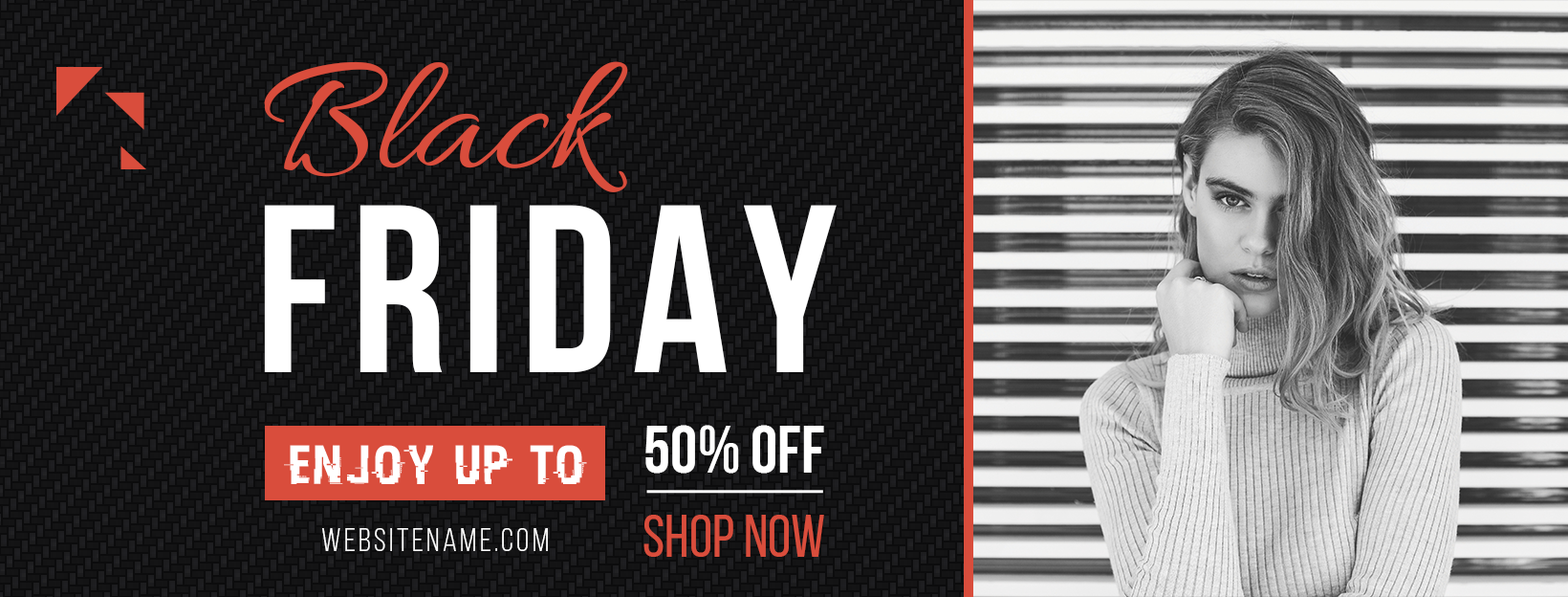
<style>
.page{position:relative;width:1568px;height:597px}
.page>*{position:absolute;margin:0}
.t1{font:171.5px "Allura-Regular";color:#d94d3c}
.t2{font:171.5px "Allura-Regular";color:#d94d3c;text-transform:uppercase}
.t3{font:237.8px "BebasNeueBold";letter-spacing:0.06em;color:#ffffff;text-transform:uppercase}
.t4{font:68.1px "BebasNeueBold";color:#ffffff;text-transform:uppercase}
.t5{font:55.5px "HACKED";letter-spacing:0.06em;color:#ffffff;text-transform:uppercase}
.t6{font:59.5px "BebasNeueRegular";color:#d94d3c;text-transform:uppercase}
.t7{font:32.5px "BebasNeueBook";letter-spacing:0.1em;color:#ffffff;text-transform:uppercase}
</style>
<div class="page">
<p class="t1" style="left:264px;top:61px;width:364px;height:131px"><span class="t2">b</span>lack</p>
<p class="t3" style="left:264px;top:205px;width:573px;height:167px">Friday</p>
<p class="t4" style="left:645px;top:425px;width:179px;height:48px">50% Off</p>
<p class="t5" style="left:284px;top:445px;width:303px;height:39px">enjoy up to</p>
<p class="t6" style="left:643px;top:514px;width:181px;height:42px">Shop now</p>
<p class="t7" style="left:322px;top:528px;width:226px;height:23px">Websitename.com</p>
</div>
